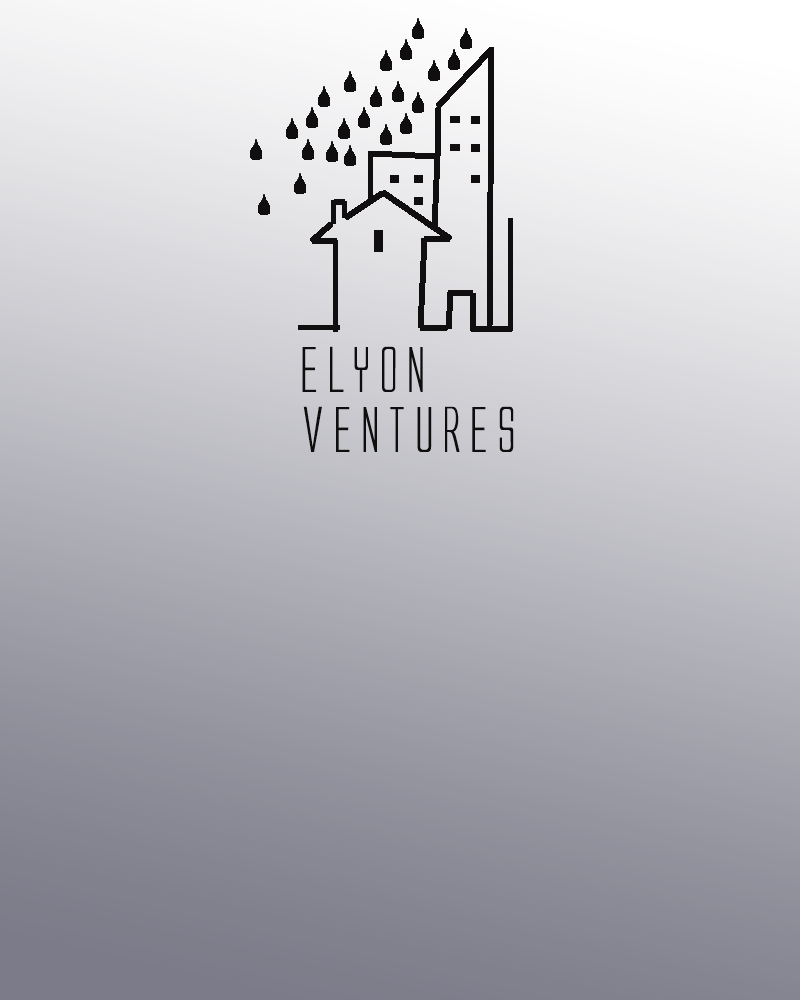
<style>
.page{position:relative;width:800px;height:1000px}
.page>*{position:absolute;margin:0}
.t1{font:60px "AlienLeague";color:#0f0e0e}
</style>
<div class="page">
<p class="t1" style="left:302px;top:346px;width:121px;height:46px">ELyon</p>
<p class="t1" style="left:303px;top:406px;width:211px;height:46px">ventures</p>
</div>
